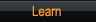
<style>
.page{position:relative;width:96px;height:22px}
.page>*{position:absolute;margin:0}
.t1{font:14px "ArialNarrow";color:#ff9933}
</style>
<div class="page">
<p class="t1" style="left:32px;top:5px;width:29px;height:12px">Learn</p>
</div>
